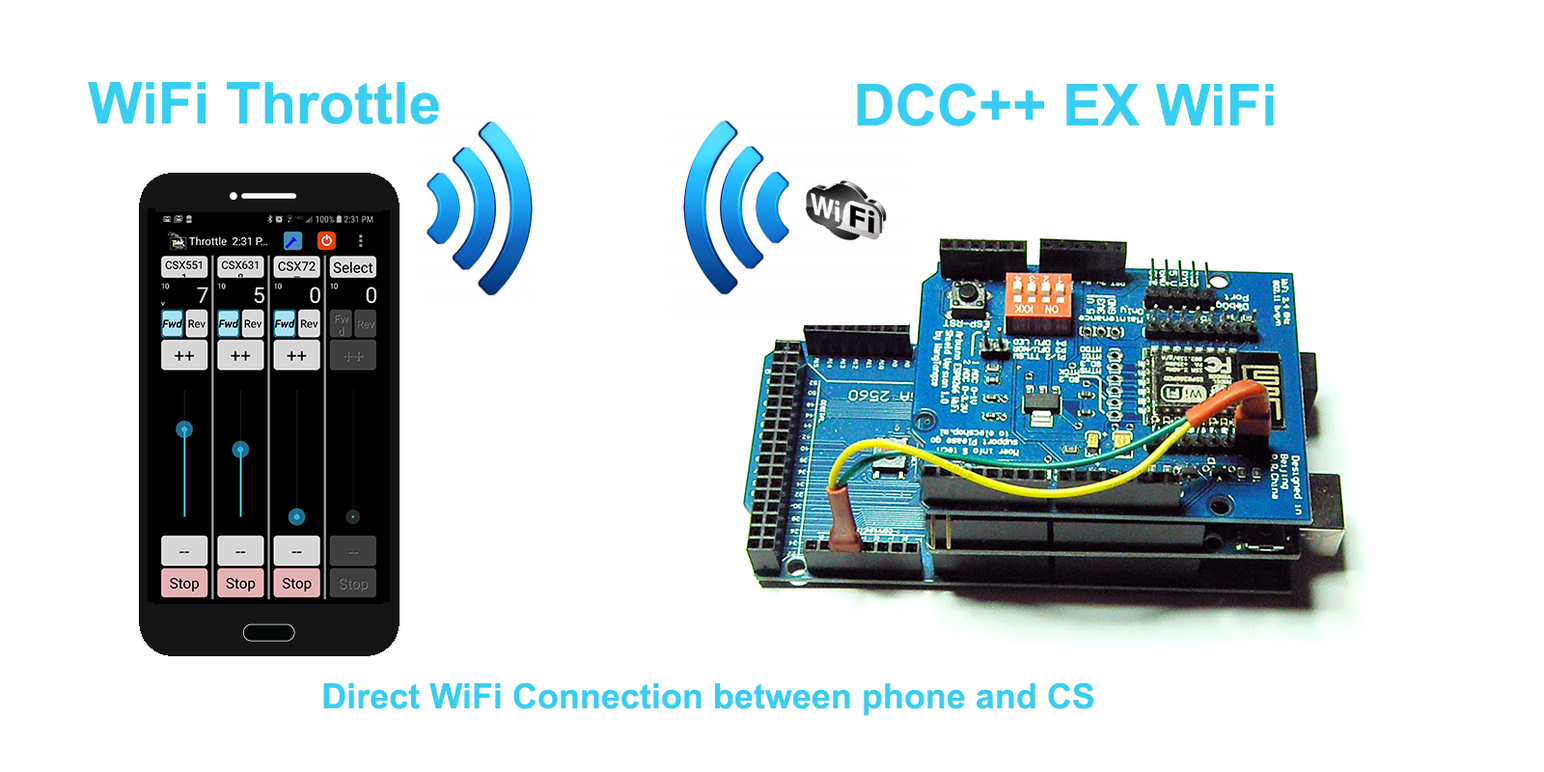
<style>
.page{position:relative;width:1544px;height:772px;background:#ffffff}
.page>*{position:absolute;margin:0}
.t1{font:57.9px "Arial-BoldMT";color:#38cef1}
.t2{font:34.7px "Arial-BoldMT";color:#38cef1}
</style>
<div class="page">
<p class="t1" style="left:88px;top:82px;width:351px;height:43px">WiFi Throttle</p>
<p class="t1" style="left:857px;top:83px;width:417px;height:43px">DCC++ EX WiFi</p>
<p class="t2" style="left:323px;top:682px;width:772px;height:34px">Direct WiFi Connection between phone and CS</p>
</div>
